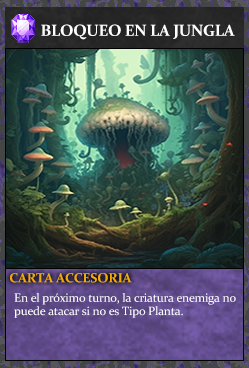
<style>
.page{position:relative;width:249px;height:368px}
.page>*{position:absolute;margin:0}
.t1{font:16px "Constantia-Bold";letter-spacing:-0.02em;color:#ffffff}
.t2{font:13.3px "Constantia-Bold";letter-spacing:-0.02em;color:#f2ac05}
.t3{font:12px/13.3px "Constantia";letter-spacing:-0.02em;color:#ffffff}
</style>
<div class="page">
<p class="t1" style="left:41px;top:24px;width:194px;height:16px">BLOQUEO EN LA JUNGLA</p>
<p class="t2" style="left:10px;top:273px;width:122px;height:10px">CARTA ACCESORIA</p>
<p class="t3" style="left:14px;top:293px;width:222px;height:25px">En el próximo turno, la criatura enemiga no<br>puede atacar si no es Tipo Planta.</p>
</div>
